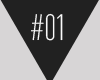
<style>
.page{position:relative;width:100px;height:80px;background:#d7d5d6}
.page>*{position:absolute;margin:0}
.t1{font:36px "DINOT-CondLight";letter-spacing:-0.05em;color:#f9f9f9;text-transform:uppercase}
</style>
<div class="page">
<p class="t1" style="left:31px;top:13px;width:32px;height:28px">#01</p>
</div>
